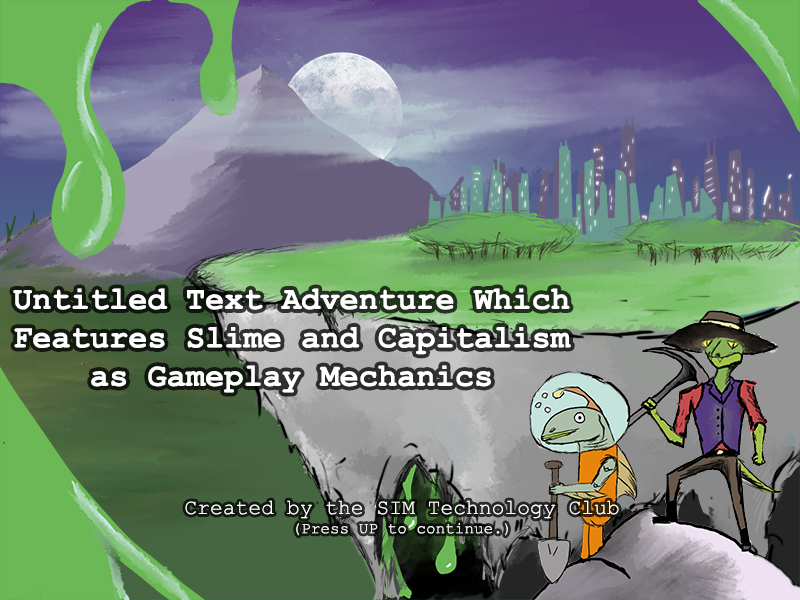
<style>
.page{position:relative;width:800px;height:600px}
.page>*{position:absolute;margin:0}
.t1{font:32px "CourierNewPS-BoldMT";color:#ffffff}
.t2{font:21.3px "CourierNewPSMT";color:#ffffff}
.t3{font:16px "CourierNewPSMT";color:#ffffff}
</style>
<div class="page">
<p class="t1" style="left:13px;top:288px;width:558px;height:105px;text-align:center">Untitled Text Adventure Which<br>Features Slime and Capitalism<br>as Gameplay Mechanics</p>
<p class="t2" style="left:185px;top:500px;width:434px;height:36px;text-align:center">Created by the SIM Technology Club<br><span class="t3">(Press UP to continue.)</span></p>
</div>
